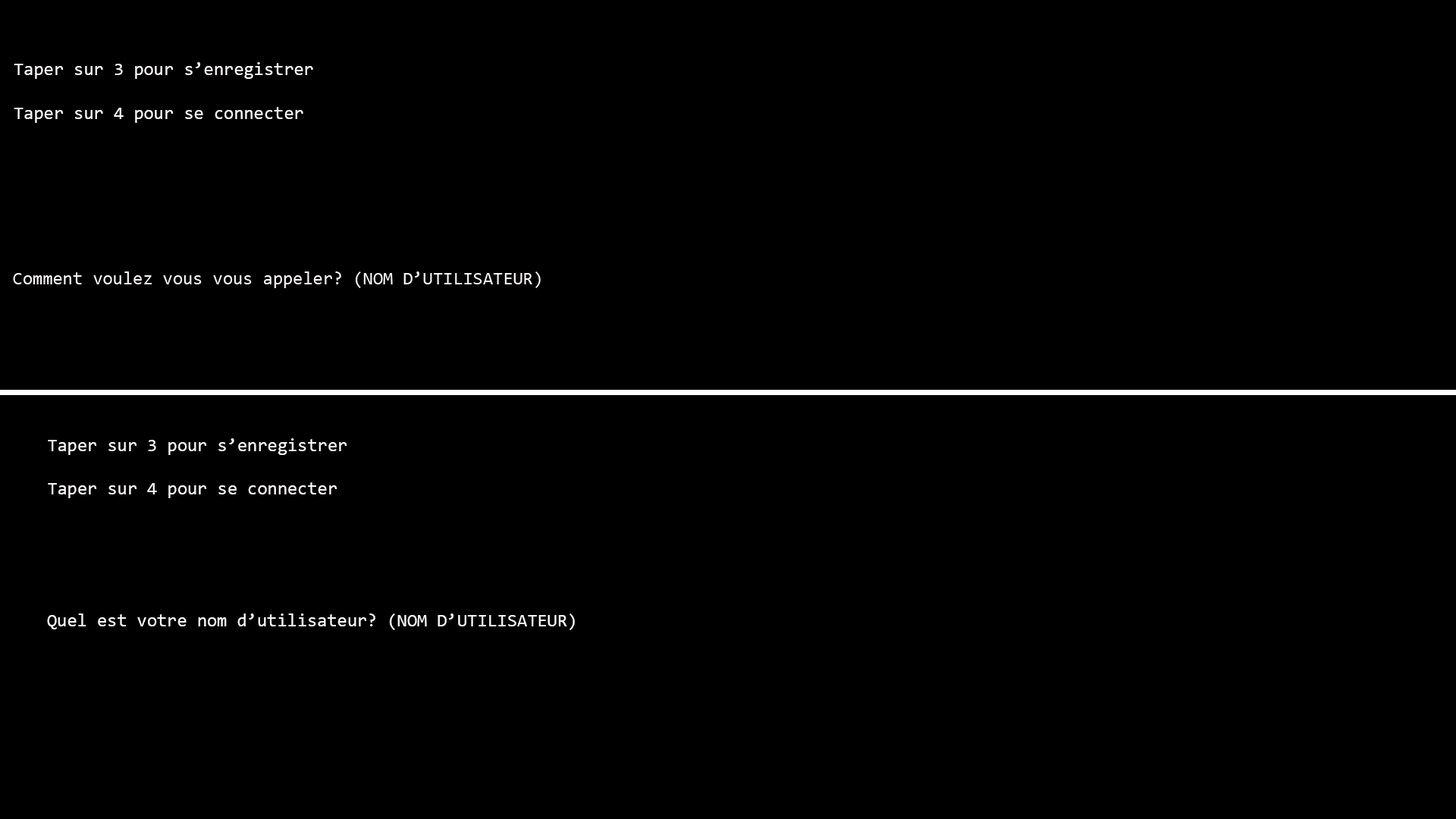
<style>
.page{position:relative;width:1456px;height:819px;background:#000000}
.page>*{position:absolute;margin:0}
.t1{font:18.2px "Consolas";color:#fcf7f7}
</style>
<div class="page">
<p class="t1" style="left:14px;top:62px;width:299px;height:61px">Taper sur 3 pour s’enregistrer<br><br>Taper sur 4 pour se connecter</p>
<p class="t1" style="left:48px;top:438px;width:299px;height:60px">Taper sur 3 pour s’enregistrer<br><br>Taper sur 4 pour se connecter</p>
<p class="t1" style="left:47px;top:613px;width:528px;height:17px">Quel est votre nom d’utilisateur? (NOM D’UTILISATEUR)</p>
</div>
